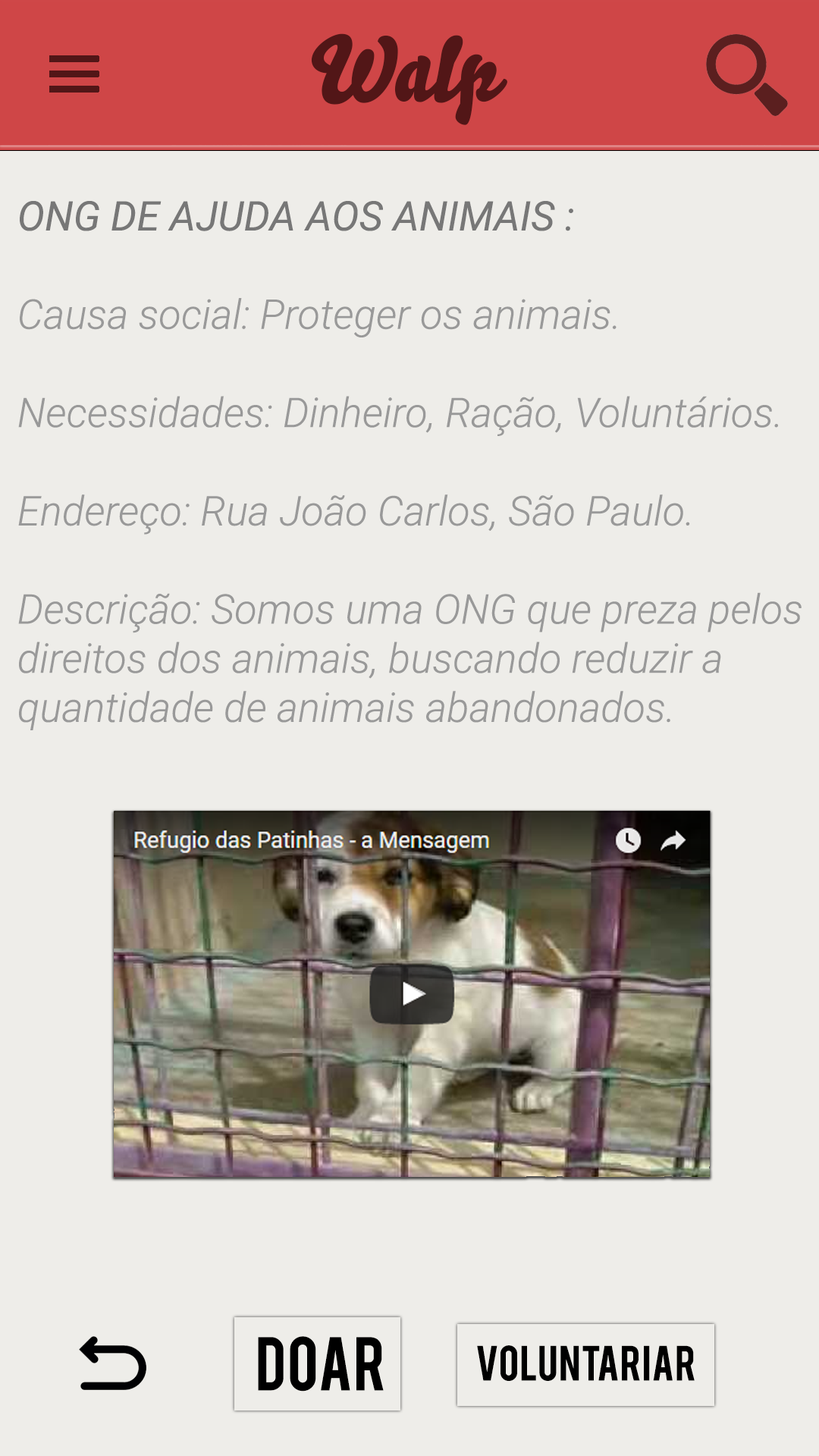
<style>
.page{position:relative;width:819px;height:1456px;background:#eeede9}
.page>*{position:absolute;margin:0}
.t1{font:90.5px "Bello-Pro";color:#521617}
.t2{font:40.9px "Roboto-LightItalic";color:#999999}
.t3{font:40.9px "Roboto-Italic";color:#777777}
.t4{font:59.6px "Bebas";color:#000000}
.t5{font:38.8px "Bebas";color:#000000}
</style>
<div class="page">
<p class="t1" style="left:311px;top:33px;width:196px;height:92px">Walp</p>
<p class="t2" style="left:18px;top:201px;width:784px;height:529px"><span class="t3">ONG DE AJUDA AOS ANIMAIS : <br></span><br>Causa social: Proteger os animais.<br><br>Necessidades: Dinheiro, Ração, Voluntários.<br><br>Endereço: Rua João Carlos, São Paulo.<br><br>Descrição: Somos uma ONG que preza pelos direitos dos animais, buscando reduzir a quantidade de animais abandonados.</p>
<p class="t4" style="left:258px;top:1336px;width:126px;height:56px">DOAR</p>
<p class="t5" style="left:477px;top:1345px;width:218px;height:36px">voluntariar</p>
</div>
